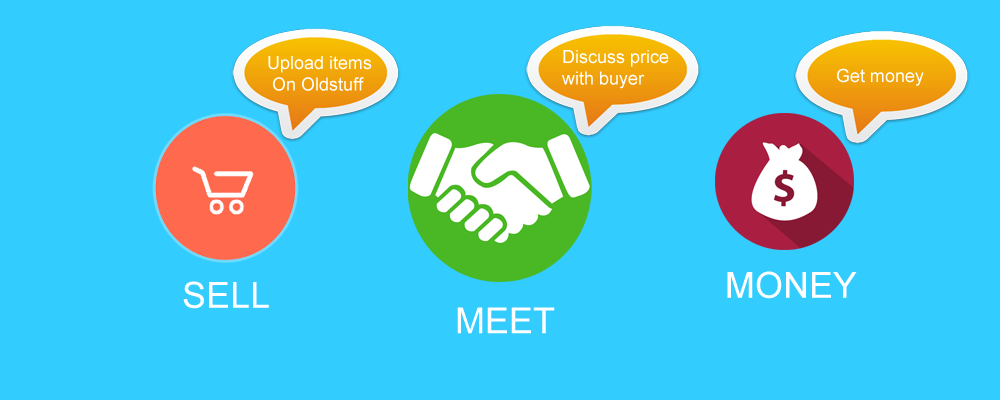
<style>
.page{position:relative;width:1000px;height:400px;background:#33ccff}
.page>*{position:absolute;margin:0}
.t1{font:18px "ArialMT";color:#ffffff}
.t2{font:36px "ArialMT";color:#ffffff}
</style>
<div class="page">
<p class="t1" style="left:562px;top:50px;width:107px;height:39px">Discuss price<br>with buyer</p>
<p class="t1" style="left:268px;top:56px;width:104px;height:35px">Upload items <br> On Oldstuff</p>
<p class="t1" style="left:837px;top:68px;width:87px;height:18px">Get money</p>
<p class="t2" style="left:183px;top:281px;width:86px;height:28px">SELL</p>
<p class="t2" style="left:727px;top:271px;width:130px;height:28px">MONEY</p>
<p class="t2" style="left:457px;top:307px;width:98px;height:27px">MEET</p>
</div>
